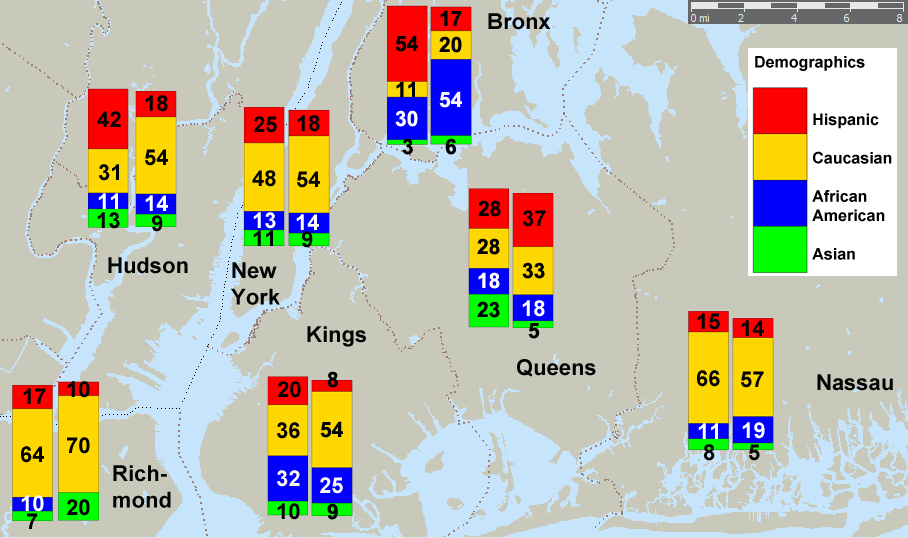
<style>
.page{position:relative;width:908px;height:538px;background:#c8c8bb}
.page>*{position:absolute;margin:0}
.t1{font:21px "Arial-BoldMT";color:#000000}
.t2{font:22px "Arial-BoldMT";color:#040404}
.t3{font:16px "Arial-BoldMT";color:#000000}
.t4{font:22px "Arial-BoldMT";color:#000000}
.t5{font:21px "Arial-BoldMT";color:#fbf7f7}
.t6{font:21px "Arial-BoldMT";color:#ffffff}
.t7{font:22px "Arial-BoldMT";color:#ffffff}
.t8{font:21px "Arial-BoldMT";color:#020000}
.t9{font:22px "Arial-BoldMT";color:#fbf7f7}
</style>
<div class="page">
<p class="t1" style="left:440px;top:10px;width:22px;height:16px">17</p>
<p class="t2" style="left:488px;top:13px;width:63px;height:17px">Bronx</p>
<p class="t1" style="left:395px;top:35px;width:23px;height:17px">54</p>
<p class="t1" style="left:439px;top:36px;width:23px;height:17px">20</p>
<p class="t3" style="left:755px;top:56px;width:137px;height:204px">Demographics<br><br>     <br>      Hispanic<br><br>      Caucasian<br>      <br>      African<br>      American<br><br>      Asian</p>
<p class="t1" style="left:396px;top:81px;width:19px;height:16px">11</p>
<p class="t4" style="left:145px;top:95px;width:23px;height:17px">18</p>
<p class="t5" style="left:439px;top:91px;width:23px;height:17px">54</p>
<p class="t4" style="left:97px;top:111px;width:24px;height:16px">42</p>
<p class="t6" style="left:395px;top:110px;width:23px;height:17px">30</p>
<p class="t2" style="left:254px;top:116px;width:23px;height:17px">25</p>
<p class="t2" style="left:297px;top:115px;width:23px;height:17px">18</p>
<p class="t4" style="left:145px;top:149px;width:23px;height:17px">54</p>
<p class="t1" style="left:402px;top:138px;width:11px;height:17px">3</p>
<p class="t1" style="left:445px;top:138px;width:11px;height:17px">6</p>
<p class="t4" style="left:99px;top:164px;width:20px;height:17px">31</p>
<p class="t2" style="left:252px;top:170px;width:24px;height:17px">48</p>
<p class="t2" style="left:297px;top:171px;width:23px;height:17px">54</p>
<p class="t7" style="left:98px;top:193px;width:20px;height:16px">11</p>
<p class="t7" style="left:145px;top:195px;width:23px;height:16px">14</p>
<p class="t8" style="left:478px;top:200px;width:23px;height:17px">28</p>
<p class="t4" style="left:97px;top:212px;width:23px;height:17px">13</p>
<p class="t4" style="left:152px;top:215px;width:11px;height:17px">9</p>
<p class="t7" style="left:253px;top:212px;width:23px;height:17px">13</p>
<p class="t7" style="left:296px;top:214px;width:23px;height:16px">14</p>
<p class="t2" style="left:523px;top:210px;width:23px;height:17px">37</p>
<p class="t2" style="left:253px;top:230px;width:20px;height:16px">11</p>
<p class="t2" style="left:302px;top:231px;width:11px;height:17px">9</p>
<p class="t8" style="left:477px;top:238px;width:23px;height:17px">28</p>
<p class="t2" style="left:108px;top:257px;width:80px;height:17px">Hudson</p>
<p class="t2" style="left:231px;top:262px;width:49px;height:43px">New<br>York</p>
<p class="t1" style="left:522px;top:262px;width:23px;height:17px">33</p>
<p class="t6" style="left:478px;top:272px;width:22px;height:17px">18</p>
<p class="t1" style="left:477px;top:301px;width:23px;height:17px">23</p>
<p class="t7" style="left:522px;top:300px;width:23px;height:17px">18</p>
<p class="t2" style="left:697px;top:313px;width:23px;height:17px">15</p>
<p class="t2" style="left:307px;top:326px;width:59px;height:21px">Kings</p>
<p class="t1" style="left:528px;top:323px;width:12px;height:16px">5</p>
<p class="t2" style="left:741px;top:320px;width:23px;height:16px">14</p>
<p class="t2" style="left:517px;top:359px;width:79px;height:18px">Queens</p>
<p class="t1" style="left:327px;top:371px;width:11px;height:17px">8</p>
<p class="t2" style="left:697px;top:370px;width:23px;height:17px">66</p>
<p class="t2" style="left:741px;top:371px;width:23px;height:17px">57</p>
<p class="t2" style="left:817px;top:374px;width:76px;height:17px">Nassau</p>
<p class="t4" style="left:23px;top:388px;width:23px;height:16px">17</p>
<p class="t4" style="left:67px;top:381px;width:23px;height:17px">10</p>
<p class="t4" style="left:278px;top:381px;width:23px;height:17px">20</p>
<p class="t4" style="left:277px;top:422px;width:23px;height:17px">36</p>
<p class="t1" style="left:320px;top:421px;width:23px;height:17px">54</p>
<p class="t7" style="left:698px;top:423px;width:20px;height:16px">11</p>
<p class="t7" style="left:742px;top:422px;width:23px;height:17px">19</p>
<p class="t4" style="left:67px;top:437px;width:23px;height:17px">70</p>
<p class="t4" style="left:21px;top:446px;width:23px;height:17px">64</p>
<p class="t2" style="left:704px;top:444px;width:11px;height:17px">8</p>
<p class="t2" style="left:749px;top:444px;width:11px;height:17px">5</p>
<p class="t2" style="left:113px;top:465px;width:58px;height:43px">Rich-<br>mond</p>
<p class="t9" style="left:277px;top:470px;width:23px;height:17px">32</p>
<p class="t9" style="left:320px;top:477px;width:23px;height:17px">25</p>
<p class="t7" style="left:21px;top:495px;width:23px;height:17px">10</p>
<p class="t4" style="left:67px;top:499px;width:23px;height:17px">20</p>
<p class="t2" style="left:277px;top:503px;width:23px;height:17px">10</p>
<p class="t1" style="left:327px;top:503px;width:11px;height:17px">9</p>
<p class="t4" style="left:27px;top:513px;width:11px;height:16px">7</p>
</div>
